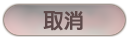
<style>
.page{position:relative;width:130px;height:40px;background:#ffffff}
.page>*{position:absolute;margin:0}
.t1{font:20px "AdobeFanHeitiStd-Bold";color:#5e4a4a;font-weight:bold}
</style>
<div class="page">
<p class="t1" style="left:43px;top:11px;width:40px;height:20px">取消</p>
</div>
